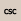
<style>
.page{position:relative;width:21px;height:21px;background:#d9cdc1}
.page>*{position:absolute;margin:0}
.t1{font:9px "Tahoma";color:#000000}
</style>
<div class="page">
<p class="t1" style="left:4px;top:8px;width:13px;height:7px">csc</p>
</div>
